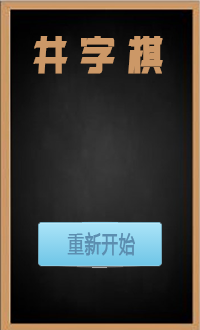
<style>
.page{position:relative;width:200px;height:330px}
.page>*{position:absolute;margin:0}
.t1{font:48px "MFLingHei_Noncommercial-Regular";letter-spacing:0.38em;color:#cc9867;font-weight:bold;scale:0.71 1}
.t2{font:23px "MicrosoftYaHei";letter-spacing:0.02em;color:#5c8eb0;font-weight:bold;scale:0.71 1}
</style>
<div class="page">
<p class="t1" style="left:33px;top:36px;width:130px;height:38px">井字棋</p>
<p class="t2" style="left:67px;top:232px;width:68px;height:24px">重新开始</p>
</div>
